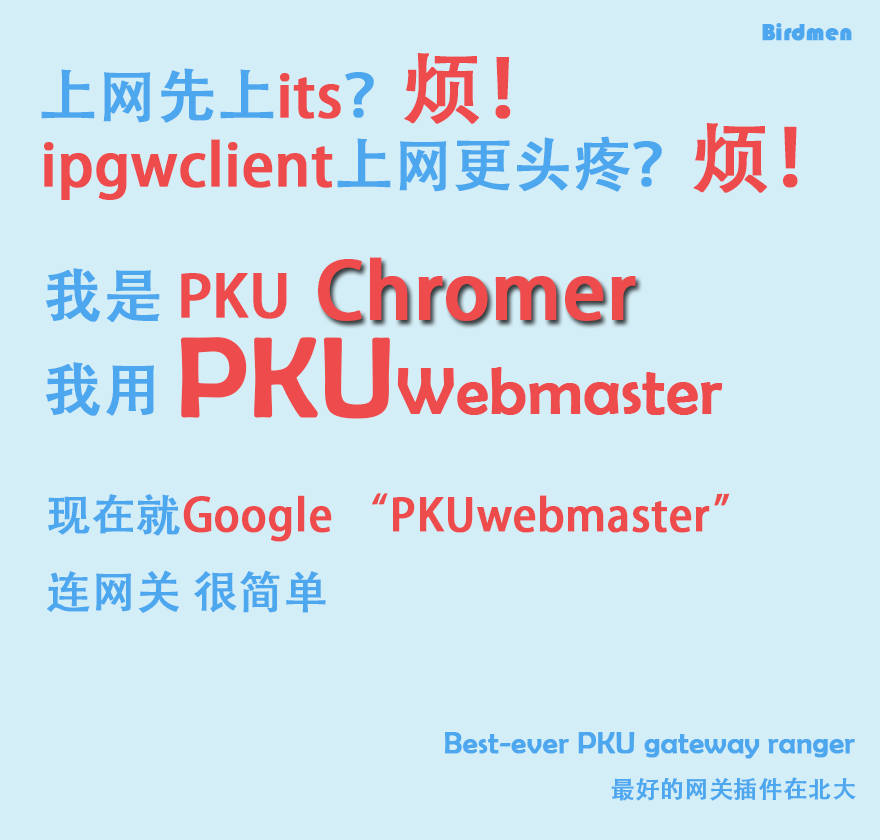
<style>
.page{position:relative;width:880px;height:840px;background:#d4eef7}
.page>*{position:absolute;margin:0}
.t1{font:24px "STHupo";color:#4ca7ee;font-weight:bold}
.t2{font:58px "AdobeHeitiStd-Regular";color:#4ca7ee;font-weight:bold}
.t3{font:58px "AdobeHeitiStd-Regular";color:#ee4c4c;font-weight:bold}
.t4{font:78px "AdobeHeitiStd-Regular";color:#ee4c4c;font-weight:bold}
.t5{font:77px "AdobeHeitiStd-Regular";color:#ee4c4c;font-weight:bold}
.t6{font:112px "BerlinSansFB-Reg";color:#ee4c4c;font-weight:bold}
.t7{font:65px "BerlinSansFB-Reg";color:#ee4c4c;font-weight:bold}
.t8{font:44px "AdobeHeitiStd-Regular";color:#ee4c4c;font-weight:bold}
.t9{font:44px "AdobeHeitiStd-Regular";color:#4ca7ee;font-weight:bold}
.t10{font:30px "BerlinSansFB-Reg";color:#4ca7ee;font-weight:bold}
.t11{font:24px "AdobeHeitiStd-Regular";color:#4ca7ee;font-weight:bold}
</style>
<div class="page">
<p class="t1" style="left:762px;top:23px;width:90px;height:18px">Birdmen</p>
<p class="t2" style="left:41px;top:53px;width:470px;height:71px">上网先上<span class="t3">its</span>？<span class="t4">烦！</span></p>
<p class="t3" style="left:44px;top:123px;width:754px;height:77px">ipgwclient<span class="t2">上网更头疼？</span><span class="t5">烦！</span></p>
<p class="t5" style="left:318px;top:257px;width:318px;height:64px">Chromer</p>
<p class="t3" style="left:46px;top:268px;width:241px;height:54px"><span class="t2">我是 </span>PKU</p>
<p class="t6" style="left:180px;top:337px;width:210px;height:82px">PKU</p>
<p class="t2" style="left:46px;top:362px;width:108px;height:54px">我用</p>
<p class="t7" style="left:397px;top:367px;width:326px;height:48px">Webmaster</p>
<p class="t8" style="left:47px;top:493px;width:683px;height:120px"><span class="t9">现在就</span>Google “PKUwebmaster”<br><span class="t9">连网关 很简单</span></p>
<p class="t10" style="left:445px;top:732px;width:410px;height:27px">Best-ever PKU gateway ranger</p>
<p class="t11" style="left:611px;top:777px;width:245px;height:24px">最好的网关插件在北大</p>
</div>
